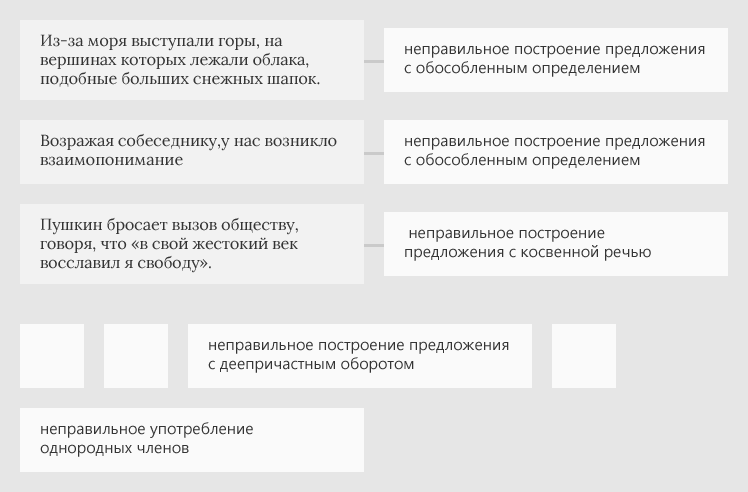
<style>
.page{position:relative;width:748px;height:492px;background:#e6e6e6}
.page>*{position:absolute;margin:0}
.t1{font:16px "Lora-Regular";color:#343434}
.t2{font:16px "SegoeUI";color:#343434}
</style>
<div class="page">
<p class="t1" style="left:40px;top:34px;width:280px;height:53px">Из-за моря выступали горы, на вершинах которых лежали облака, подобные больших снежных шапок.</p>
<p class="t2" style="left:404px;top:45px;width:301px;height:32px">неправильное построение предложения с обособленным определением</p>
<p class="t1" style="left:40px;top:133px;width:297px;height:33px">Возражая собеседнику,у нас возникло взаимопонимание</p>
<p class="t2" style="left:404px;top:137px;width:301px;height:32px">неправильное построение предложения с обособленным определением</p>
<p class="t1" style="left:40px;top:217px;width:258px;height:56px">Пушкин бросает вызов обществу, говоря, что «в свой жестокий век восславил я свободу».</p>
<p class="t2" style="left:405px;top:229px;width:246px;height:32px">неправильное построение предложения с косвенной речью</p>
<p class="t2" style="left:208px;top:341px;width:301px;height:32px">неправильное построение предложения с деепричастным оборотом</p>
<p class="t2" style="left:40px;top:422px;width:213px;height:35px">неправильное употребление однородных членов</p>
</div>
